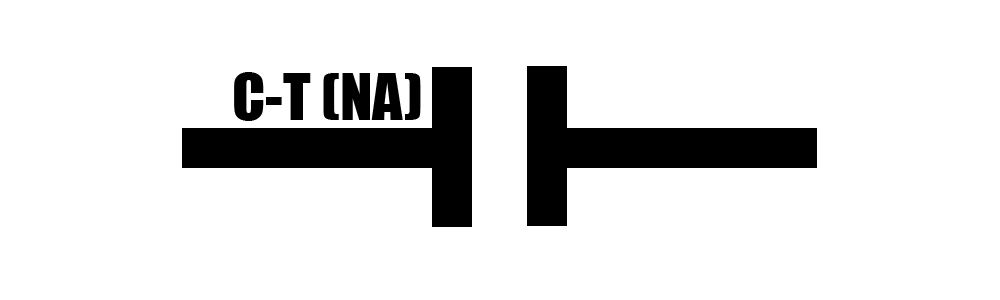
<style>
.page{position:relative;width:1000px;height:300px;background:#ffffff}
.page>*{position:absolute;margin:0}
.t1{font:60px "Impact";color:#000000}
</style>
<div class="page">
<p class="t1" style="left:234px;top:72px;width:187px;height:49px">C-T (NA)</p>
</div>
